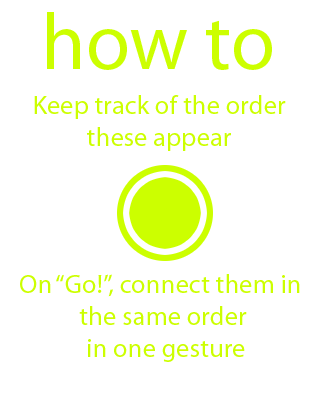
<style>
.page{position:relative;width:320px;height:400px;background:#ffffff}
.page>*{position:absolute;margin:0}
.t1{font:80px "MyriadPro-Regular";color:#ccff00}
.t2{font:26.7px "MyriadPro-Regular";color:#ccff00}
</style>
<div class="page">
<p class="t1" style="left:47px;top:12px;width:225px;height:58px">how to</p>
<p class="t2" style="left:34px;top:95px;width:252px;height:56px;text-align:center">Keep track of the order<br>these appear</p>
<p class="t2" style="left:20px;top:274px;width:280px;height:88px;text-align:center">On “Go!”, connect them in <br>the same order<br> in one gesture</p>
</div>
